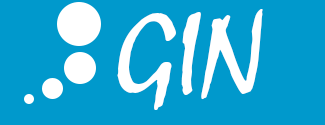
<style>
.page{position:relative;width:325px;height:125px;background:#0099cc}
.page>*{position:absolute;margin:0}
.t1{font:120px "Mistral";color:#ffffff}
</style>
<div class="page">
<p class="t1" style="left:117px;top:9px;width:146px;height:101px">GIN</p>
</div>
